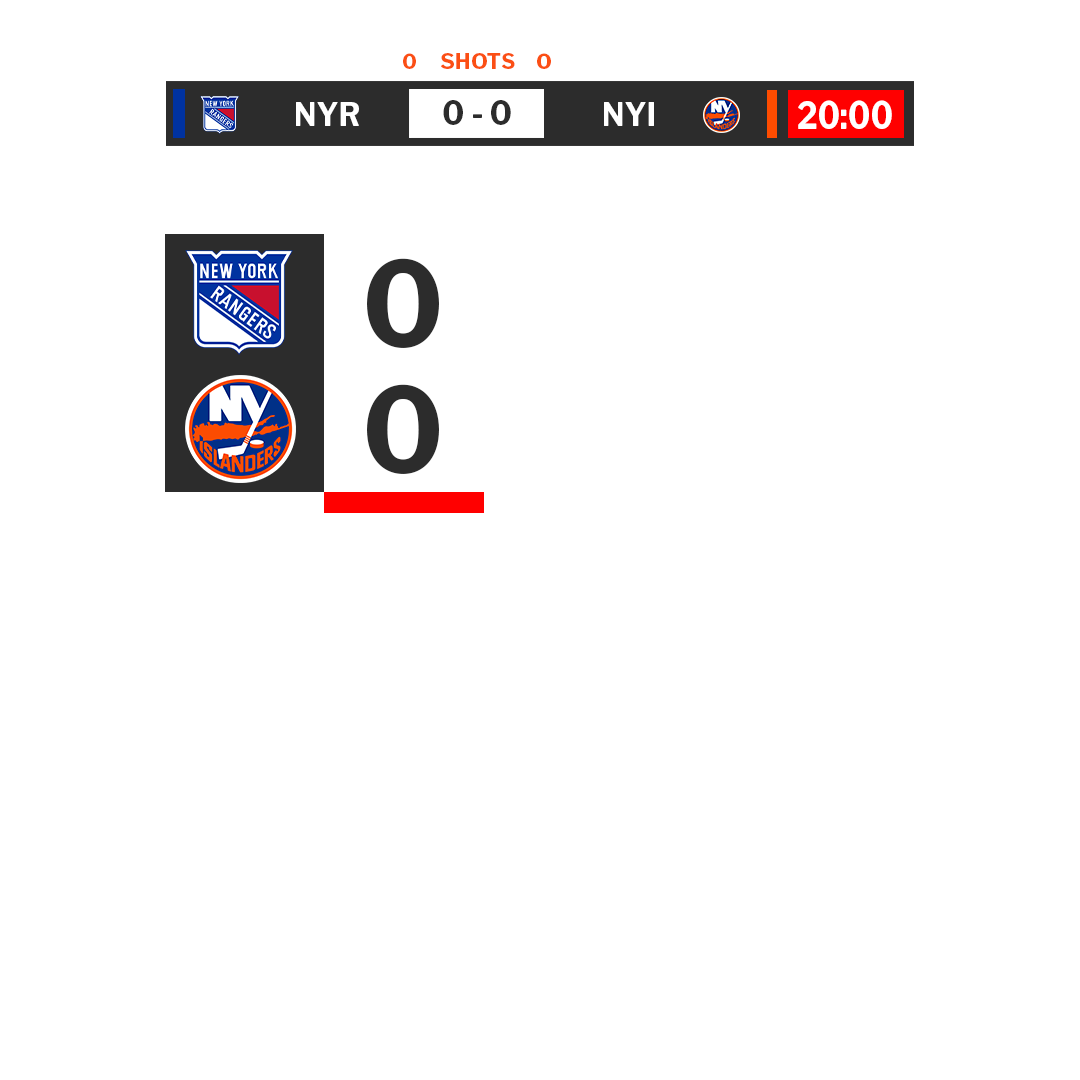
<style>
.page{position:relative;width:1080px;height:1080px;background:#ffffff}
.page>*{position:absolute;margin:0}
.t1{font:20.6px "LibreFranklin-Bold";color:#fb4f14;text-transform:uppercase}
.t2{font:21.1px "LibreFranklin-Bold";color:#fb4f14;text-transform:uppercase}
.t3{font:20.6px "LibreFranklin-Bold";color:#fb4f14;text-transform:uppercase;scale:1.09 1}
.t4{font:32.3px "LibreFranklin-Bold";color:#ffffff;text-transform:uppercase;scale:0.92 1}
.t5{font:33.2px "LibreFranklin-Bold";color:#2c2c2c;text-transform:uppercase;scale:0.95 1}
.t6{font:37.7px "LibreFranklin-Bold";color:#ffffff;text-transform:uppercase;scale:0.84 1}
.t7{font:117.6px "LibreFranklin-Bold";color:#2c2c2c;text-transform:uppercase}
</style>
<div class="page">
<p class="t1" style="left:403px;top:53px;width:13px;height:16px">0</p>
<p class="t2" style="left:441px;top:53px;width:74px;height:16px">shots</p>
<p class="t3" style="left:537px;top:53px;width:14px;height:16px">0</p>
<p class="t4" style="left:296px;top:102px;width:63px;height:24px">NYr</p>
<p class="t5" style="left:443px;top:100px;width:68px;height:25px">0 - 0</p>
<p class="t4" style="left:604px;top:102px;width:50px;height:24px">NYi</p>
<p class="t6" style="left:798px;top:100px;width:94px;height:29px">20:00</p>
<p class="t7" style="left:367px;top:258px;width:72px;height:90px">0</p>
<p class="t7" style="left:367px;top:384px;width:72px;height:90px">0</p>
</div>
